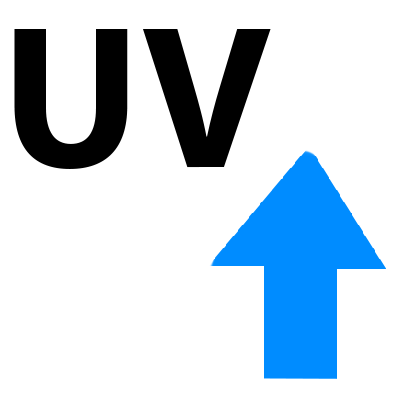
<style>
.page{position:relative;width:400px;height:400px;background:#ffffff}
.page>*{position:absolute;margin:0}
.t1{font:205.5px "MyriadPro-Bold";color:#000000}
</style>
<div class="page">
<p class="t1" style="left:14px;top:29px;width:257px;height:140px">UV</p>
</div>
